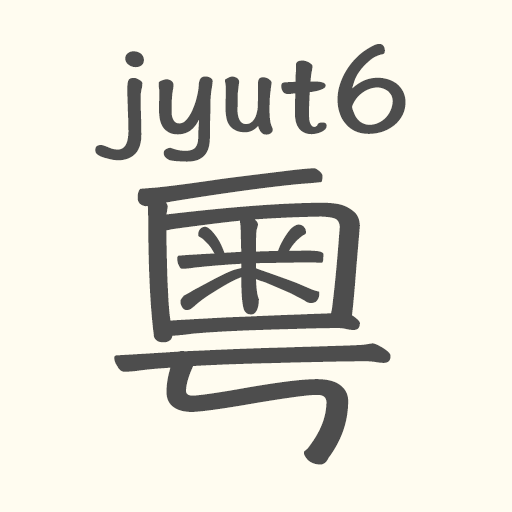
<style>
.page{position:relative;width:512px;height:512px;background:#fffcf0}
.page>*{position:absolute;margin:0}
.t1{font:125px "HannotateSC-W7";color:#4d4d4d}
.t2{font:316.7px "HannotateSC-W5";color:#4d4d4d}
</style>
<div class="page">
<p class="t1" style="left:95px;top:44px;width:311px;height:118px">jyut6</p>
<p class="t2" style="left:114px;top:168px;width:277px;height:297px">粤</p>
</div>
